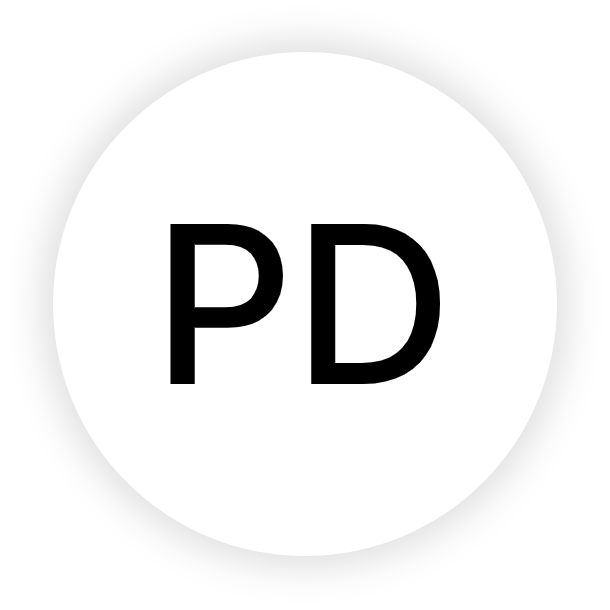
<style>
.page{position:relative;width:610px;height:610px;background:#ffffff}
.page>*{position:absolute;margin:0}
.t1{font:220px "Inter-Medium";color:#000000}
</style>
<div class="page">
<p class="t1" style="left:170px;top:224px;width:270px;height:160px">PD</p>
</div>
